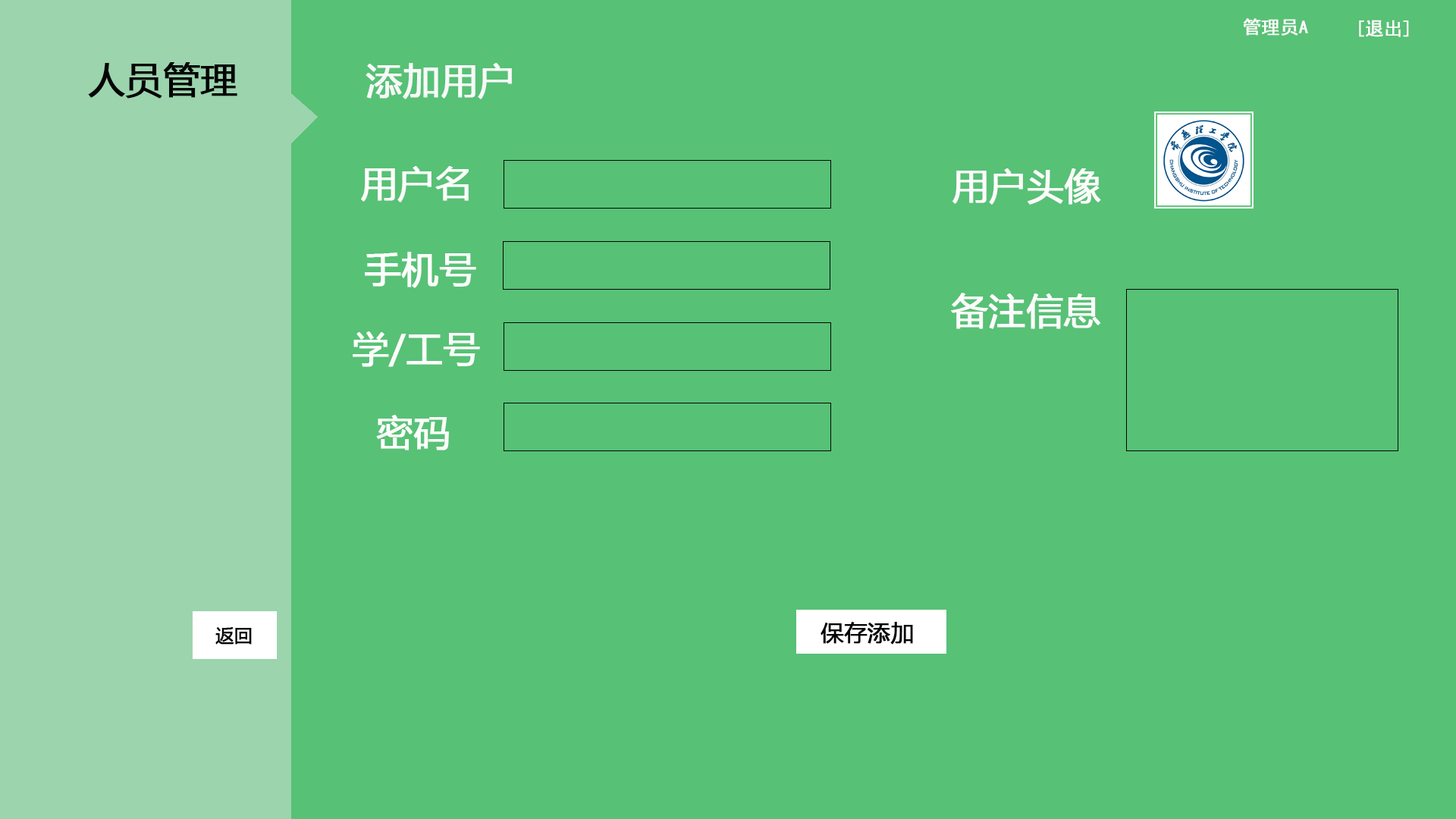
<style>
.page{position:relative;width:1456px;height:819px;background:#57c176}
.page>*{position:absolute;margin:0}
.t1{font:18.2px "SimHei";color:#fcfafa;font-weight:bold}
.t2{font:36.4px "MicrosoftYaHei";color:#050505;font-weight:bold}
.t3{font:36.4px "MicrosoftYaHei";color:#f7f9f8;font-weight:bold}
.t4{font:36.4px "MicrosoftYaHei";color:#fdfefc;font-weight:bold}
.t5{font:36.4px "MicrosoftYaHei";color:#fdfbfb;font-weight:bold}
.t6{font:18.2px "MicrosoftYaHei";color:#050505;font-weight:bold}
.t7{font:22.7px "MicrosoftYaHei";color:#040404;font-weight:bold}
</style>
<div class="page">
<p class="t1" style="left:1243px;top:18px;width:65px;height:18px">管理员A</p>
<p class="t1" style="left:1359px;top:20px;width:50px;height:17px">[退出]</p>
<p class="t2" style="left:88px;top:62px;width:149px;height:37px">人员管理</p>
<p class="t3" style="left:366px;top:63px;width:146px;height:36px">添加用户</p>
<p class="t4" style="left:361px;top:166px;width:108px;height:36px">用户名</p>
<p class="t5" style="left:952px;top:168px;width:149px;height:37px">用户头像</p>
<p class="t4" style="left:365px;top:252px;width:111px;height:36px">手机号</p>
<p class="t5" style="left:951px;top:293px;width:150px;height:36px">备注信息</p>
<p class="t4" style="left:353px;top:331px;width:127px;height:36px">学/工号</p>
<p class="t4" style="left:376px;top:415px;width:73px;height:35px">密码</p>
<p class="t6" style="left:215px;top:627px;width:37px;height:18px">返回</p>
<p class="t7" style="left:821px;top:622px;width:92px;height:23px">保存添加</p>
</div>
